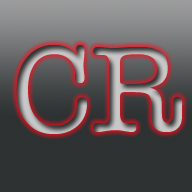
<style>
.page{position:relative;width:192px;height:192px}
.page>*{position:absolute;margin:0}
.t1{font:125px "AmericanTypewriter"}
</style>
<div class="page">
<p class="t1" style="left:16px;top:45px;width:167px;height:89px">CR</p>
</div>
